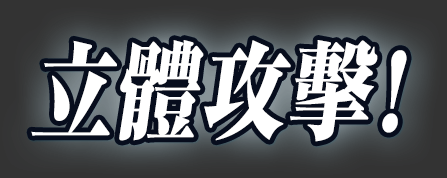
<style>
.page{position:relative;width:447px;height:178px}
.page>*{position:absolute;margin:0}
.t1{font:106px "RyuminPro-ExHeavy";letter-spacing:0.075em;color:#ffffff;font-style:italic;scale:0.79 1}
</style>
<div class="page">
<p class="t1" style="left:31px;top:40px;width:376px;height:102px">立體攻擊!</p>
</div>
